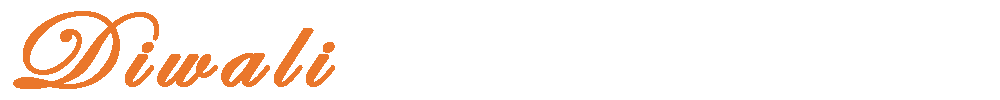
<style>
.page{position:relative;width:1000px;height:100px;background:#ffffff}
.page>*{position:absolute;margin:0}
.t1{font:109.4px "EdwardianScriptITC";letter-spacing:0.08em;color:#ea772b;font-weight:bold;scale:1.09 1}
</style>
<div class="page">
<p class="t1" style="left:13px;top:11px;width:322px;height:78px">Diwali</p>
</div>
